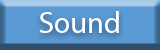
<style>
.page{position:relative;width:160px;height:50px;background:#5b9bd5}
.page>*{position:absolute;margin:0}
.t1{font:30px "MyriadPro-Regular";color:#ffffff}
</style>
<div class="page">
<p class="t1" style="left:39px;top:11px;width:80px;height:22px">Sound</p>
</div>
